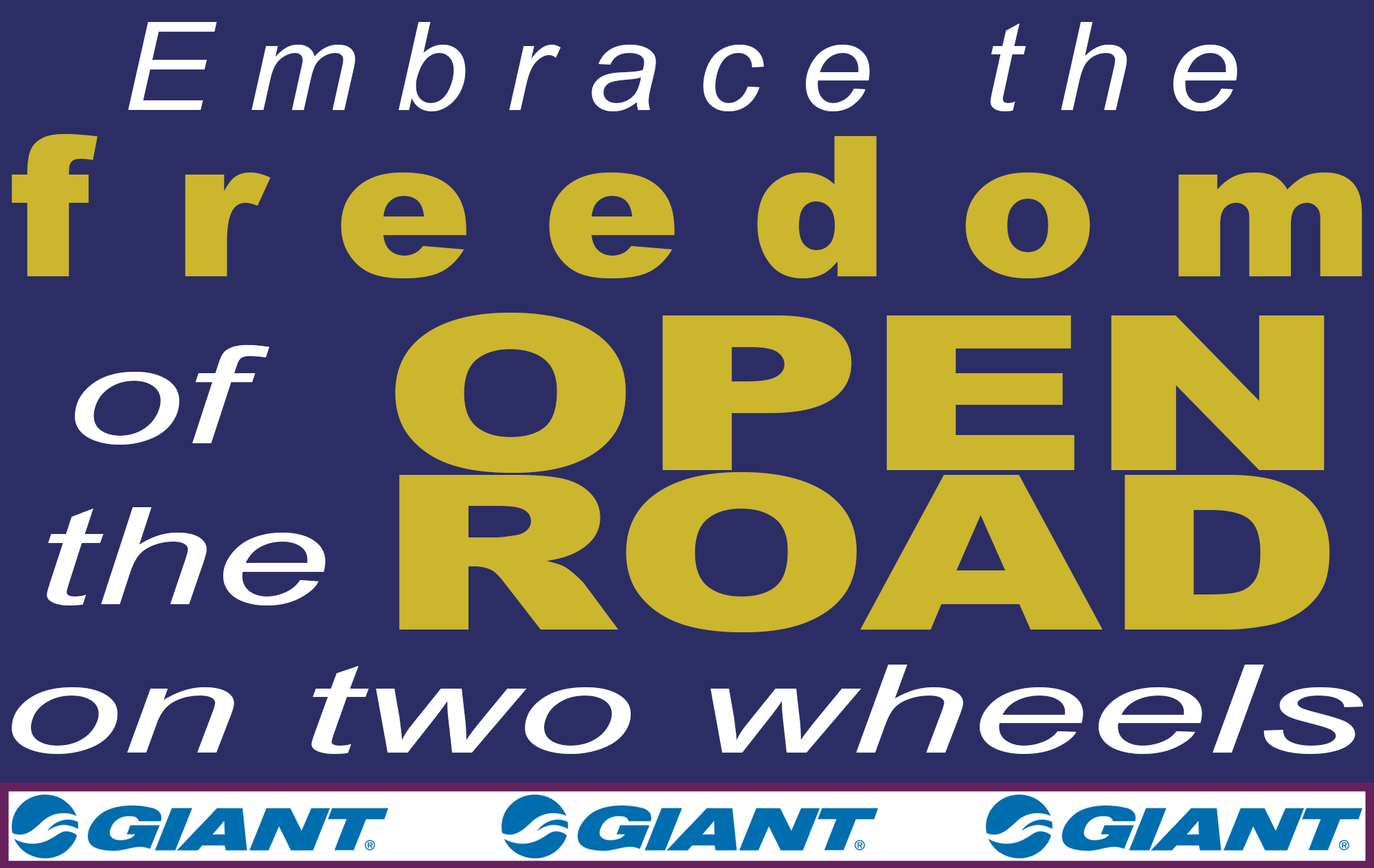
<style>
.page{position:relative;width:1374px;height:868px;background:#2d2d66}
.page>*{position:absolute;margin:0}
.t1{font:122.6px "Arial-ItalicMT";color:#ffffff;scale:1.08 1}
.t2{font:195.9px "Arial-Black";color:#cbb62d;scale:1.06 1}
.t3{font:216px "Arial-Black";color:#cbb62d;scale:1.44 1}
.t4{font:134.4px "Arial-ItalicMT";color:#ffffff;scale:1.58 1}
.t5{font:122.6px "Arial-ItalicMT";color:#ffffff;scale:1.75 1}
</style>
<div class="page">
<p class="t1" style="left:128px;top:22px;width:1109px;height:89px">E m b r a c e   t h e</p>
<p class="t2" style="left:12px;top:134px;width:1350px;height:144px">f r e e d o m</p>
<p class="t3" style="left:395px;top:313px;width:930px;height:160px">OPEN</p>
<p class="t4" style="left:47px;top:345px;width:279px;height:260px;text-align:center">of <br>the</p>
<p class="t3" style="left:399px;top:472px;width:931px;height:160px">ROAD</p>
<p class="t5" style="left:12px;top:664px;width:1351px;height:90px">on two wheels</p>
</div>
